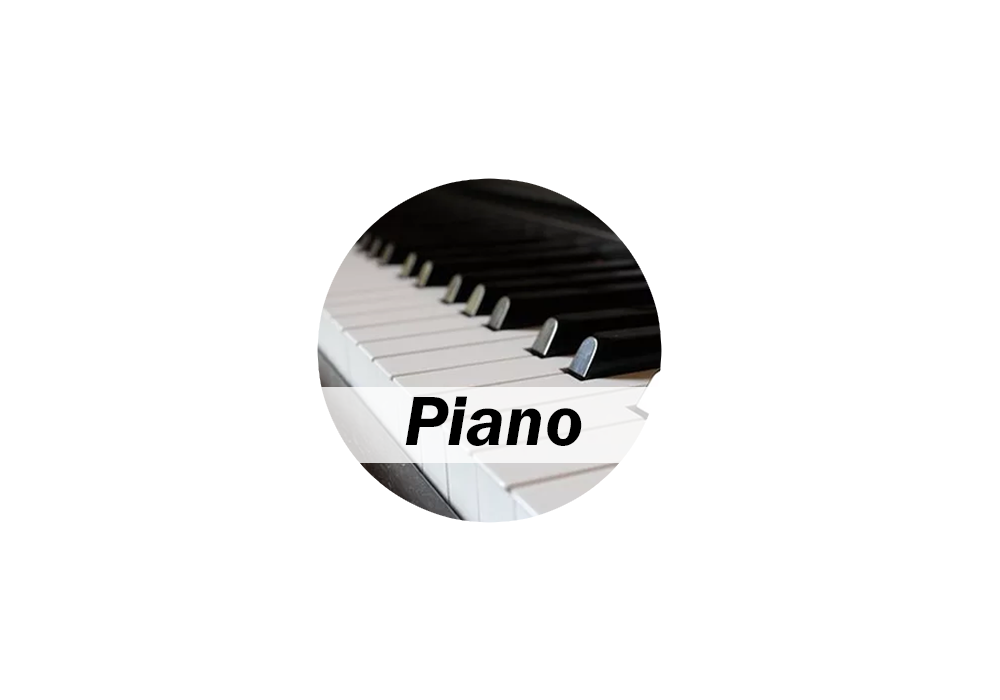
<style>
.page{position:relative;width:1000px;height:700px;background:#ffffff}
.page>*{position:absolute;margin:0}
.t1{font:72px "FranklinGothic-DemiItalic";color:#000000}
</style>
<div class="page">
<p class="t1" style="left:405px;top:396px;width:177px;height:50px">Piano</p>
</div>
